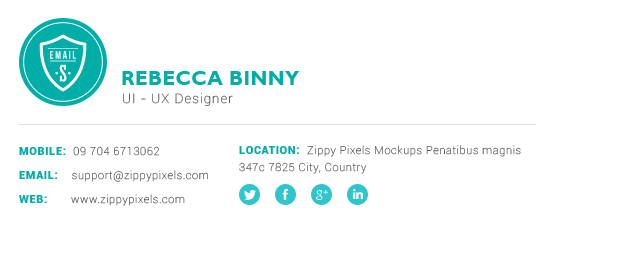
<style>
.page{position:relative;width:620px;height:259px;background:#ffffff}
.page>*{position:absolute;margin:0}
.t1{font:20px "GillSansMT-Bold";letter-spacing:0.02em;color:#00ada7;text-transform:uppercase}
.t2{font:13px "Roboto-Thin";letter-spacing:0.08em;color:#5d5e5e}
.t3{font:11px/12px "Roboto-Thin";letter-spacing:0.06em;color:#5d5e5e}
.t4{font:11px/12px "Roboto-Black";letter-spacing:0.06em;color:#00ada7}
.t5{font:11px/16.5px "Roboto-Thin";letter-spacing:0.06em;color:#5d5e5e}
.t6{font:11px/16.5px "Roboto-Black";letter-spacing:0.06em;color:#00ada7}
</style>
<div class="page">
<p class="t1" style="left:122px;top:71px;width:178px;height:14px">Rebecca Binny</p>
<p class="t2" style="left:123px;top:92px;width:110px;height:14px">UI - UX Designer</p>
<p class="t3" style="left:19px;top:146px;width:189px;height:60px"><span class="t4">MOBILE: </span> 09 704 6713062<br><br><span class="t4">EMAIL: </span>   support@zippypixels.com<br><br><span class="t4">WEB:</span>       www.zippypixels.com</p>
<p class="t5" style="left:239px;top:145px;width:282px;height:29px"><span class="t6">LOCATION:  </span>Zippy Pixels Mockups Penatibus magnis<br>347c 7825 City, Country</p>
</div>
